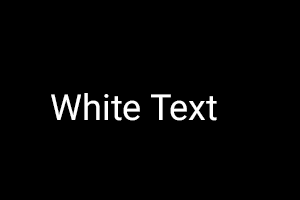
<style>
.page{position:relative;width:300px;height:200px;background:#000000}
.page>*{position:absolute;margin:0}
.t1{font:36px "Roboto-Regular";color:#ffffff}
</style>
<div class="page">
<p class="t1" style="left:51px;top:93px;width:166px;height:28px">White Text</p>
</div>
